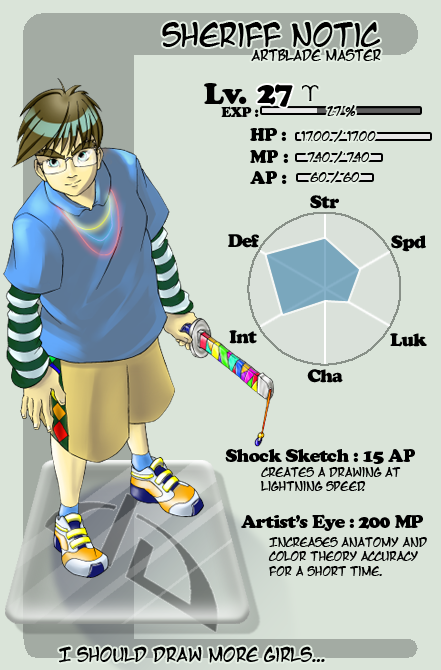
<style>
.page{position:relative;width:441px;height:670px;background:#dae4d9}
.page>*{position:absolute;margin:0}
.t1{font:30px "MangaTemple";letter-spacing:-0.05em;color:#000000}
.t2{font:14px "MangaTemple";letter-spacing:-0.05em;color:#000000}
.t3{font:30px "CooperBlackStd";letter-spacing:-0.05em;color:#000000}
.t4{font:24px "AstroGadget";letter-spacing:-0.05em;color:#000000}
.t5{font:14px "CooperBlackStd";letter-spacing:-0.05em;color:#000000}
.t6{font:12px "MangaTemple";letter-spacing:-0.05em;color:#000000}
.t7{font:18px "CooperBlackStd";letter-spacing:-0.05em;color:#000000}
.t8{font:18px "MangaTemple";letter-spacing:-0.05em;color:#000000}
</style>
<div class="page">
<p class="t1" style="left:162px;top:22px;width:218px;height:25px">Sheriff Notic</p>
<p class="t2" style="left:251px;top:49px;width:130px;height:12px">Artblade Master</p>
<p class="t3" style="left:204px;top:83px;width:43px;height:22px">Lv.</p>
<p class="t3" style="left:257px;top:84px;width:36px;height:23px">27</p>
<p class="t4" style="left:302px;top:85px;width:17px;height:16px">a</p>
<p class="t5" style="left:221px;top:106px;width:38px;height:11px">EXP :</p>
<p class="t6" style="left:327px;top:105px;width:29px;height:12px">27 %</p>
<p class="t7" style="left:250px;top:128px;width:38px;height:56px">HP :<br>MP :<br>AP :</p>
<p class="t6" style="left:301px;top:130px;width:75px;height:12px">1700 / 1700</p>
<p class="t6" style="left:307px;top:151px;width:63px;height:12px">740 / 740</p>
<p class="t6" style="left:310px;top:171px;width:50px;height:12px">60 / 60</p>
<p class="t7" style="left:310px;top:195px;width:29px;height:14px">Str</p>
<p class="t7" style="left:228px;top:234px;width:31px;height:14px">Def</p>
<p class="t7" style="left:391px;top:235px;width:35px;height:17px">Spd</p>
<p class="t7" style="left:229px;top:330px;width:28px;height:14px">Int</p>
<p class="t7" style="left:390px;top:333px;width:37px;height:14px">Luk</p>
<p class="t7" style="left:307px;top:369px;width:36px;height:14px">Cha</p>
<p class="t7" style="left:225px;top:449px;width:190px;height:15px">Shock Sketch : 15 AP</p>
<p class="t6" style="left:261px;top:467px;width:140px;height:24px">Creates a drawing at lightning speed.</p>
<p class="t7" style="left:241px;top:514px;width:182px;height:17px">Artist’s Eye : 200 MP</p>
<p class="t6" style="left:268px;top:537px;width:159px;height:39px">Increases anatomy and color theory accuracy for a short time.</p>
<p class="t8" style="left:59px;top:646px;width:266px;height:17px">I should draw more girls...</p>
</div>
